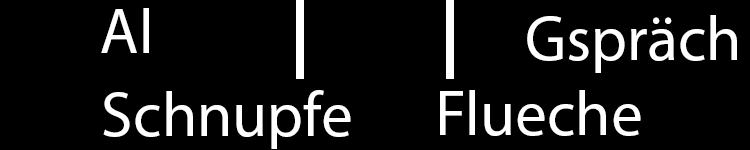
<style>
.page{position:relative;width:750px;height:150px;background:#000000}
.page>*{position:absolute;margin:0}
.t1{font:63.5px "MyriadPro-Regular";color:#ffffff}
</style>
<div class="page">
<p class="t1" style="left:101px;top:8px;width:48px;height:45px">Al</p>
<p class="t1" style="left:527px;top:15px;width:210px;height:58px">Gspräch</p>
<p class="t1" style="left:103px;top:90px;width:248px;height:59px">Schnupfe</p>
<p class="t1" style="left:440px;top:90px;width:201px;height:46px">Flueche</p>
</div>
